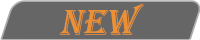
<style>
.page{position:relative;width:200px;height:40px;background:#666666}
.page>*{position:absolute;margin:0}
.t1{font:36.9px "Algerian";color:#ec9035;font-style:italic}
</style>
<div class="page">
<p class="t1" style="left:59px;top:3px;width:85px;height:32px">New</p>
</div>
